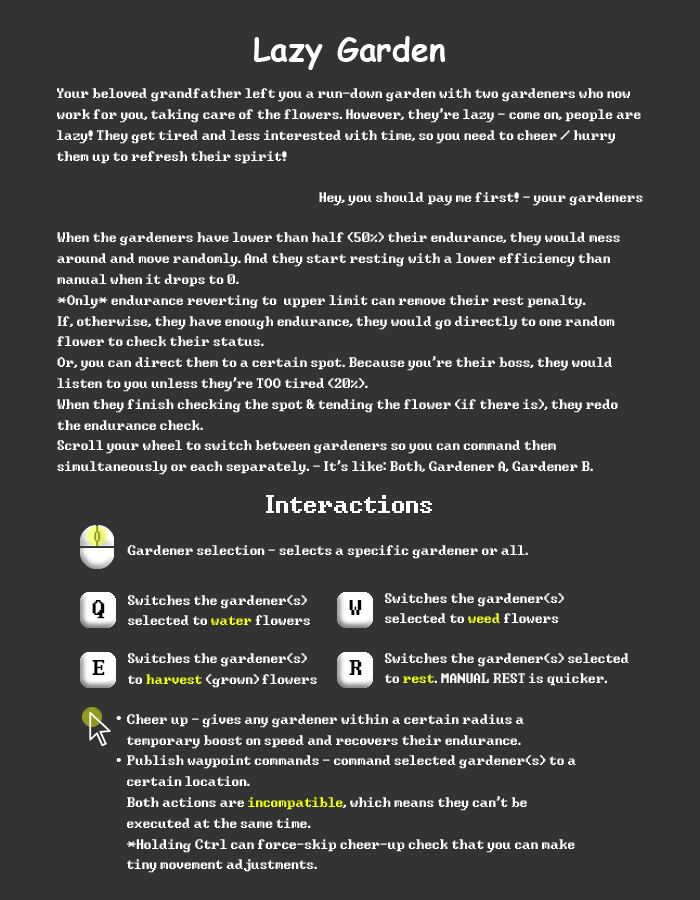
<style>
.page{position:relative;width:700px;height:900px;background:#333333}
.page>*{position:absolute;margin:0}
.t1{font:32px "ComicSansMS-Bold";color:#ffffff}
.t2{font:17.3px "Windows-Command-Prompt";color:#ffffff}
.t3{font:32px "Windows-Command-Prompt";color:#ffffff}
.t4{font:17.3px "Windows-Command-Prompt";color:#f1ff0c}
.t5{font:26.7px "Windows-Command-Prompt";color:#000000}
.t6{font:17.3px "TimesNewRomanPSMT";color:#ffffff}
</style>
<div class="page">
<p class="t1" style="left:254px;top:36px;width:191px;height:34px">Lazy Garden</p>
<p class="t2" style="left:57px;top:88px;width:586px;height:118px">Your beloved grandfather left you a run-down garden with two gardeners who now work for you, taking care of the flowers. However, they're lazy - come on, people are lazy! They get tired and less interested with time, so you need to cheer / hurry them up to refresh their spirit!<br><br>Hey, you should pay me first! - your gardeners</p>
<p class="t2" style="left:57px;top:232px;width:563px;height:243px">When the gardeners have lower than half (50%) their endurance, they would mess around and move randomly. And they start resting with a lower efficiency than manual when it drops to 0.<br>*Only* endurance reverting to  upper limit can remove their rest penalty.<br>If, otherwise, they have enough endurance, they would go directly to one random flower to check their status.<br>Or, you can direct them to a certain spot. Because you're their boss, they would listen to you unless they're TOO tired (20%).<br>When they finish checking the spot &amp; tending the flower (if there is), they redo the endurance check.<br>Scroll your wheel to switch between gardeners so you can command them simultaneously or each separately. - It's like: Both, Gardener A, Gardener B.</p>
<p class="t3" style="left:266px;top:495px;width:166px;height:18px">Interactions</p>
<p class="t2" style="left:127px;top:545px;width:401px;height:14px">Gardener selection - selects a specific gardener or all.</p>
<p class="t2" style="left:385px;top:593px;width:179px;height:30px">Switches the gardener(s)<br>selected to <span class="t4">weed</span> flowers</p>
<p class="t5" style="left:92px;top:600px;width:13px;height:19px">Q</p>
<p class="t2" style="left:128px;top:595px;width:182px;height:30px">Switches the gardener(s) <br>selected to <span class="t4">water</span> flowers</p>
<p class="t5" style="left:349px;top:600px;width:13px;height:15px">W</p>
<p class="t2" style="left:128px;top:653px;width:189px;height:35px">Switches the gardener(s)<br>to <span class="t4">harvest </span>(grown) flowers</p>
<p class="t2" style="left:385px;top:653px;width:244px;height:33px">Switches the gardener(s) selected<br>to <span class="t4">rest</span>. MANUAL REST is quicker.</p>
<p class="t5" style="left:92px;top:660px;width:13px;height:15px">E</p>
<p class="t5" style="left:349px;top:660px;width:13px;height:15px">R</p>
<p class="t6" style="left:116px;top:716px;width:5px;height:4px">•</p>
<p class="t2" style="left:127px;top:714px;width:449px;height:159px">Cheer up - gives any gardener within a certain radius a temporary boost on speed and recovers their endurance.<br>Publish waypoint commands - command selected gardener(s) to a certain location.<br>Both actions are <span class="t4">incompatible</span>, which means they can't be executed at the same time. <br>*Holding Ctrl can force-skip cheer-up check that you can make tiny movement adjustments.</p>
<p class="t6" style="left:116px;top:758px;width:5px;height:4px">•</p>
</div>
